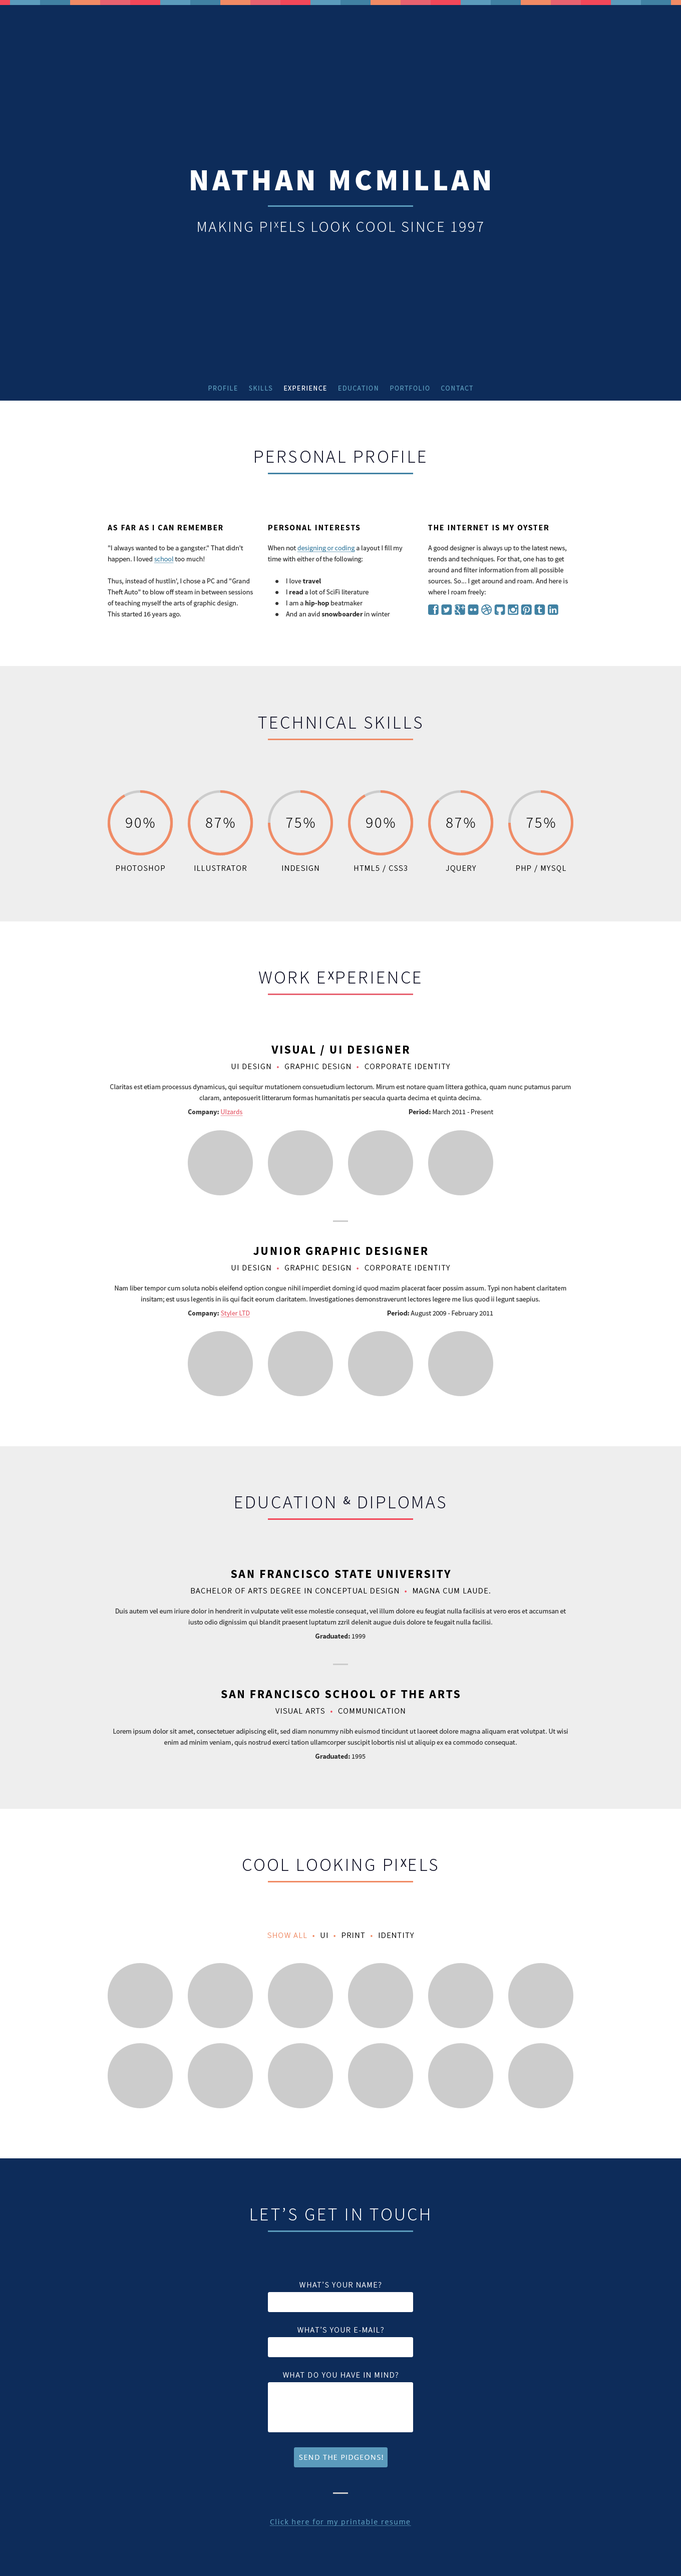
<style>
.page{position:relative;width:681px;height:2576px;background:#ffffff}
.page>*{position:absolute;margin:0}
.t1{font:30px "SourceSansPro-Black";letter-spacing:0.1em;color:#ffffff}
.t2{font:15px "SourceSansPro-Light";letter-spacing:0.1em;color:#ffffff}
.t3{font:9px "SourceSansPro-Light";letter-spacing:0.1em;color:#ffffff}
.t4{font:7px "SourceSansPro-Regular";letter-spacing:0.1em;color:#5b9bbc}
.t5{font:7px "SourceSansPro-Regular";letter-spacing:0.1em;color:#ffffff}
.t6{font:18px "SourceSansPro-Light";letter-spacing:0.1em;color:#0f1025}
.t7{font:8px "SourceSansPro-Bold";letter-spacing:0.1em;color:#000000}
.t8{font:7px/11px "SourceSansPro-Regular";color:#333333}
.t9{font:7px/11px "SourceSansPro-Regular";color:#4081a3;text-decoration:underline}
.t10{font:7px/11px "SourceSansPro-Bold";color:#333333}
.t11{font:15px "SourceSansPro-Light";letter-spacing:0.1em;color:#000000}
.t12{font:8px "SourceSansPro-Light";letter-spacing:0.1em;color:#000000}
.t13{font:12px "SourceSansPro-Regular";letter-spacing:0.1em;color:#0f1025}
.t14{font:12px "SourceSansPro-Bold";letter-spacing:0.1em;color:#000000}
.t15{font:8px "SourceSansPro-Light";letter-spacing:0.1em;color:#e76270}
.t16{font:7px "SourceSansPro-Bold";color:#333333}
.t17{font:7px "SourceSansPro-Regular";color:#e76270;text-decoration:underline}
.t18{font:7px "SourceSansPro-Regular";color:#333333}
.t19{font:8px "SourceSansPro-Light";letter-spacing:0.1em;color:#f24759}
.t20{font:8px "SourceSansPro-Light";letter-spacing:0.1em;color:#f08b65}
.t21{font:18px "SourceSansPro-Light";letter-spacing:0.1em;color:#ffffff}
.t22{font:8px "SourceSansPro-Light";letter-spacing:0.1em;color:#ffffff}
.t23{font:7px "OpenSans";letter-spacing:0.1em;color:#ffffff}
.t24{font:7px "OpenSans";letter-spacing:0.1em;color:#5b9bbc;text-decoration:underline}
</style>
<div class="page">
<p class="t1" style="left:191px;top:170px;width:299px;height:20px">NATHAN MCMILLAN</p>
<p class="t2" style="left:198px;top:222px;width:285px;height:10px">MAKING PI<span class="t3">X</span>ELS LOOK COOL SINCE 1997</p>
<p class="t4" style="left:208px;top:386px;width:265px;height:5px">PROFILE     SKILLS     <span class="t5">EXPERIENCE</span>     EDUCATION     PORTFOLIO     CONTACT</p>
<p class="t6" style="left:255px;top:451px;width:171px;height:12px">PERSONAL PROFILE</p>
<p class="t7" style="left:108px;top:525px;width:115px;height:5px">AS FAR AS I CAN REMEMBER</p>
<p class="t7" style="left:268px;top:525px;width:92px;height:5px">PERSONAL INTERESTS</p>
<p class="t7" style="left:428px;top:525px;width:121px;height:5px">THE INTERNET IS MY OYSTER</p>
<p class="t8" style="left:108px;top:545px;width:145px;height:73px">"I always wanted to be a gangster." That didn't happen. I loved <span class="t9">school</span> too much!<br><br>Thus, instead of hustlin', I chose a PC and "Grand Theft Auto" to blow off steam in between sessions of teaching myself the arts of graphic design.<br>This started 16 years ago.</p>
<p class="t8" style="left:268px;top:545px;width:135px;height:71px">When not <span class="t9">designing or coding</span> a layout I fill my time with either of the following:<br><br>  I love <span class="t10">travel</span><br>  I <span class="t10">read</span> a lot of SciFi literature<br> I am a <span class="t10">hip-hop</span> beatmaker<br> And an avid <span class="t10">snowboarder</span> in winter</p>
<p class="t8" style="left:428px;top:545px;width:140px;height:51px">A good designer is always up to the latest news, trends and techniques. For that, one has to get around and filter information from all possible sources. So... I get around and roam. And here is where I roam freely:</p>
<p class="t6" style="left:258px;top:717px;width:164px;height:12px">TECHNICAL SKILLS</p>
<p class="t11" style="left:126px;top:818px;width:29px;height:10px">90%</p>
<p class="t11" style="left:206px;top:818px;width:29px;height:10px">87%</p>
<p class="t11" style="left:286px;top:818px;width:29px;height:10px">75%</p>
<p class="t11" style="left:366px;top:818px;width:29px;height:10px">90%</p>
<p class="t11" style="left:446px;top:818px;width:29px;height:10px">87%</p>
<p class="t11" style="left:526px;top:818px;width:29px;height:10px">75%</p>
<p class="t12" style="left:116px;top:865px;width:49px;height:6px">PHOTOSHOP</p>
<p class="t12" style="left:194px;top:865px;width:53px;height:6px">ILLUSTRATOR</p>
<p class="t12" style="left:282px;top:865px;width:37px;height:6px">INDESIGN</p>
<p class="t12" style="left:354px;top:865px;width:53px;height:7px">HTML5 / CSS3</p>
<p class="t12" style="left:446px;top:865px;width:30px;height:7px">JQUERY</p>
<p class="t12" style="left:516px;top:865px;width:50px;height:7px">PHP / MYSQL</p>
<p class="t6" style="left:259px;top:972px;width:162px;height:12px">WORK E<span class="t13">X</span>PERIENCE</p>
<p class="t14" style="left:271px;top:1045px;width:139px;height:11px">VISUAL / UI DESIGNER</p>
<p class="t12" style="left:231px;top:1064px;width:219px;height:5px">UI DESIGN  <span class="t15">•</span>  GRAPHIC DESIGN  <span class="t15">•</span>  CORPORATE IDENTITY</p>
<p class="t8" style="left:110px;top:1084px;width:461px;height:18px;text-align:center">Claritas est etiam processus dynamicus, qui sequitur mutationem consuetudium lectorum. Mirum est notare quam littera gothica, quam nunc putamus parum claram, anteposuerit litterarum formas humanitatis per seacula quarta decima et quinta decima.</p>
<p class="t16" style="left:188px;top:1109px;width:55px;height:7px">Company: <span class="t17">UIzards</span></p>
<p class="t18" style="left:409px;top:1109px;width:84px;height:5px"><span class="t16">Period:</span> March 2011 - Present</p>
<p class="t14" style="left:253px;top:1247px;width:175px;height:8px">JUNIOR GRAPHIC DESIGNER</p>
<p class="t12" style="left:231px;top:1265px;width:219px;height:5px">UI DESIGN  <span class="t15">•</span>  GRAPHIC DESIGN  <span class="t15">•</span>  CORPORATE IDENTITY</p>
<p class="t8" style="left:115px;top:1285px;width:451px;height:18px;text-align:center">Nam liber tempor cum soluta nobis eleifend option congue nihil imperdiet doming id quod mazim placerat facer possim assum. Typi non habent claritatem insitam; est usus legentis in iis qui facit eorum claritatem. Investigationes demonstraverunt lectores legere me lius quod ii legunt saepius.</p>
<p class="t17" style="left:188px;top:1311px;width:62px;height:7px"><span class="t16">Company: </span>Styler LTD</p>
<p class="t18" style="left:387px;top:1310px;width:106px;height:7px"><span class="t16">Period:</span> August 2009 - February 2011</p>
<p class="t6" style="left:235px;top:1496px;width:210px;height:12px">EDUCATION <span class="t13">&amp;</span> DIPLOMAS</p>
<p class="t14" style="left:231px;top:1570px;width:220px;height:8px">SAN FRANCISCO STATE UNIVERSITY</p>
<p class="t12" style="left:191px;top:1588px;width:299px;height:5px">BACHELOR OF ARTS DEGREE IN CONCEPTUAL DESIGN  <span class="t19">•  </span>MAGNA CUM LAUDE.</p>
<p class="t8" style="left:116px;top:1608px;width:450px;height:18px;text-align:center">Duis autem vel eum iriure dolor in hendrerit in vulputate velit esse molestie consequat, vel illum dolore eu feugiat nulla facilisis at vero eros et accumsan et iusto odio dignissim qui blandit praesent luptatum zzril delenit augue duis dolore te feugait nulla facilisi.</p>
<p class="t16" style="left:315px;top:1634px;width:51px;height:5px">Graduated:<span class="t18"> 1999</span></p>
<p class="t14" style="left:221px;top:1690px;width:239px;height:8px">SAN FRANCISCO SCHOOL OF THE ARTS</p>
<p class="t12" style="left:275px;top:1708px;width:130px;height:6px">VISUAL ARTS  <span class="t19">•  </span>COMMUNICATION</p>
<p class="t8" style="left:113px;top:1729px;width:455px;height:17px;text-align:center">Lorem ipsum dolor sit amet, consectetuer adipiscing elit, sed diam nonummy nibh euismod tincidunt ut laoreet dolore magna aliquam erat volutpat. Ut wisi enim ad minim veniam, quis nostrud exerci tation ullamcorper suscipit lobortis nisl ut aliquip ex ea commodo consequat.</p>
<p class="t16" style="left:315px;top:1754px;width:51px;height:5px">Graduated:<span class="t18"> 1995</span></p>
<p class="t6" style="left:243px;top:1859px;width:194px;height:12px">COOL LOOKING PI<span class="t13">X</span>ELS</p>
<p class="t20" style="left:267px;top:1933px;width:147px;height:5px">SHOW ALL  •<span class="t12">  UI  </span>•<span class="t12">  PRINT  </span>•<span class="t12">  IDENTITY</span></p>
<p class="t21" style="left:251px;top:2208px;width:178px;height:12px">LET’S GET IN TOUCH</p>
<p class="t22" style="left:299px;top:2282px;width:83px;height:6px">WHAT’S YOUR NAME?</p>
<p class="t22" style="left:297px;top:2327px;width:87px;height:6px">WHAT’S YOUR E-MAIL?</p>
<p class="t22" style="left:283px;top:2372px;width:115px;height:6px">WHAT DO YOU HAVE IN MIND?</p>
<p class="t23" style="left:299px;top:2455px;width:84px;height:5px">SEND THE PIDGEONS!</p>
<p class="t24" style="left:269px;top:2519px;width:142px;height:7px">Click here for my printable resume</p>
</div>
